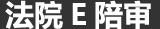
<style>
.page{position:relative;width:160px;height:29px;background:#333333}
.page>*{position:absolute;margin:0}
.t1{font:29px "MicrosoftYaHei-Bold";color:#ffffff}
</style>
<div class="page">
<p class="t1" style="left:5px;top:0px;width:146px;height:30px">法院E陪审</p>
</div>
